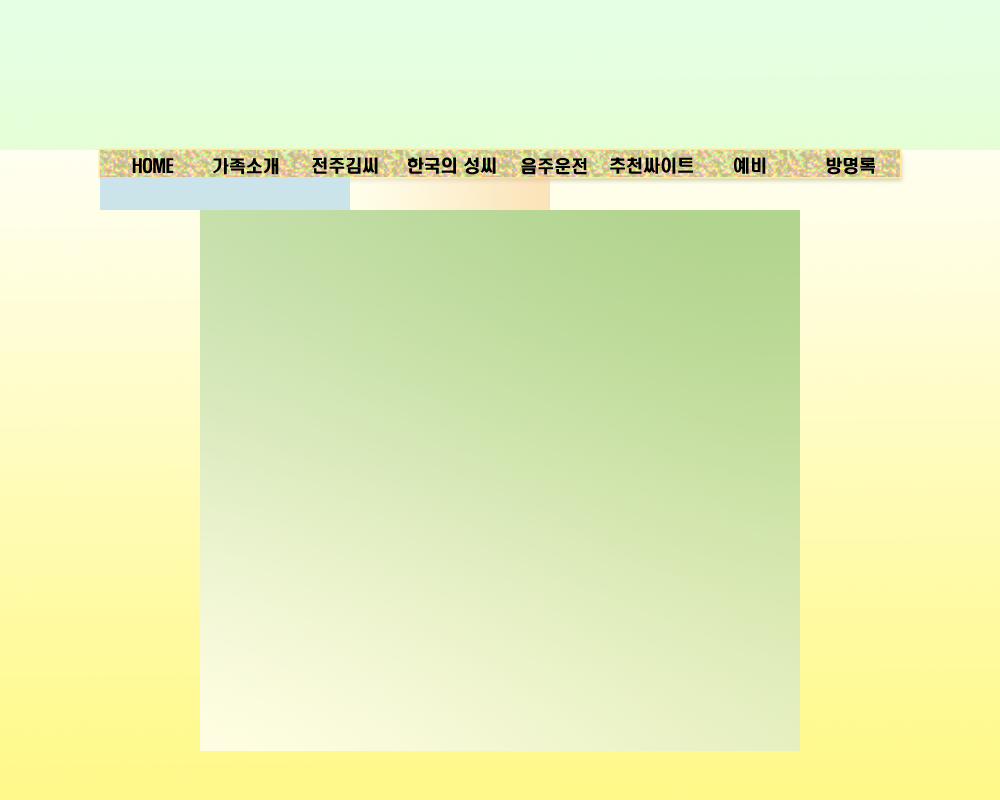
<style>
.page{position:relative;width:1000px;height:800px}
.page>*{position:absolute;margin:0}
.t1{font:17px "H2hdrM";color:#000000}
</style>
<div class="page">
<p class="t1" style="left:132px;top:158px;width:42px;height:16px">HOME</p>
<p class="t1" style="left:213px;top:158px;width:66px;height:17px">가족소개</p>
<p class="t1" style="left:312px;top:157px;width:66px;height:17px">전주김씨</p>
<p class="t1" style="left:408px;top:157px;width:88px;height:18px">한국의 성씨</p>
<p class="t1" style="left:521px;top:158px;width:66px;height:17px">음주운전</p>
<p class="t1" style="left:610px;top:157px;width:83px;height:17px">추천싸이트</p>
<p class="t1" style="left:734px;top:157px;width:32px;height:17px">예비</p>
<p class="t1" style="left:826px;top:157px;width:49px;height:18px">방명록</p>
</div>
